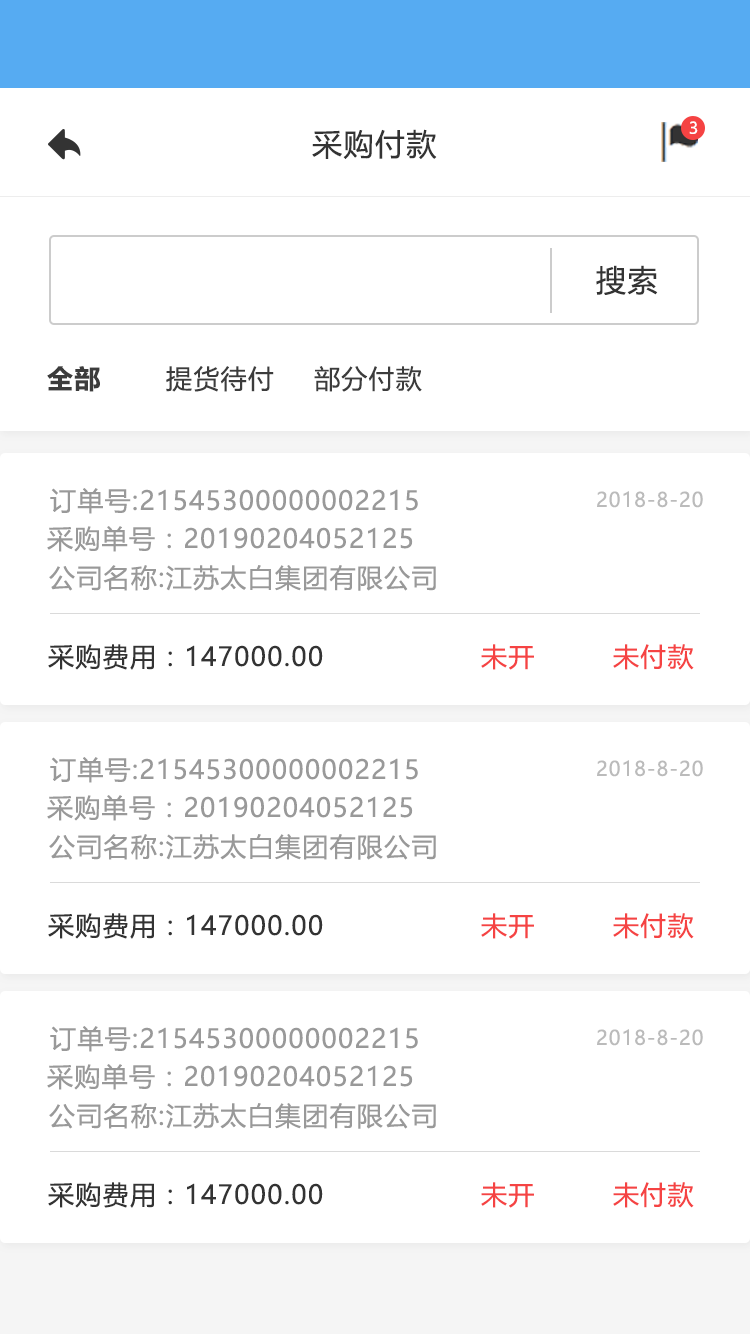
<style>
.page{position:relative;width:750px;height:1334px;background:#ffffff}
.page>*{position:absolute;margin:0}
.t1{font:16px "MicrosoftYaHeiUI";color:#ffffff}
.t2{font:30px "MicrosoftYaHeiUI";letter-spacing:0.05em;color:#333333}
.t3{font:26px "MicrosoftYaHeiUI-Bold";letter-spacing:0.05em;color:#3c3c3c}
.t4{font:26px "MicrosoftYaHeiUI";letter-spacing:0.05em;color:#3c3c3c}
.t5{font:26px "MicrosoftYaHeiUI";letter-spacing:0.05em;color:#999999}
.t6{font:20px "MicrosoftYaHeiUI";letter-spacing:0.05em;color:#bbbbbb}
.t7{font:26px "MicrosoftYaHeiUI";letter-spacing:0.05em;color:#333333}
.t8{font:26px "MicrosoftYaHeiUI";letter-spacing:0.05em;color:#f54343}
</style>
<div class="page">
<p class="t1" style="left:689px;top:121px;width:9px;height:13px">3</p>
<p class="t2" style="left:312px;top:129px;width:125px;height:30px">采购付款</p>
<p class="t2" style="left:596px;top:265px;width:62px;height:30px">搜索</p>
<p class="t3" style="left:47px;top:366px;width:53px;height:26px">全部</p>
<p class="t4" style="left:166px;top:366px;width:108px;height:26px">提货待付</p>
<p class="t4" style="left:314px;top:366px;width:108px;height:26px">部分付款</p>
<p class="t5" style="left:50px;top:488px;width:368px;height:26px">订单号:21545300000002215</p>
<p class="t6" style="left:597px;top:491px;width:106px;height:17px">2018-8-20</p>
<p class="t5" style="left:47px;top:526px;width:366px;height:26px">采购单号：20190204052125</p>
<p class="t5" style="left:49px;top:565px;width:387px;height:26px">公司名称:江苏太白集团有限公司</p>
<p class="t7" style="left:48px;top:644px;width:275px;height:26px">采购费用：147000.00</p>
<p class="t8" style="left:481px;top:644px;width:53px;height:26px">未开</p>
<p class="t8" style="left:613px;top:644px;width:81px;height:26px">未付款</p>
<p class="t5" style="left:50px;top:757px;width:368px;height:26px">订单号:21545300000002215</p>
<p class="t6" style="left:597px;top:760px;width:106px;height:17px">2018-8-20</p>
<p class="t5" style="left:47px;top:795px;width:366px;height:26px">采购单号：20190204052125</p>
<p class="t5" style="left:49px;top:834px;width:387px;height:26px">公司名称:江苏太白集团有限公司</p>
<p class="t7" style="left:48px;top:913px;width:275px;height:26px">采购费用：147000.00</p>
<p class="t8" style="left:481px;top:913px;width:53px;height:26px">未开</p>
<p class="t8" style="left:613px;top:913px;width:81px;height:26px">未付款</p>
<p class="t5" style="left:50px;top:1026px;width:368px;height:26px">订单号:21545300000002215</p>
<p class="t6" style="left:597px;top:1029px;width:106px;height:17px">2018-8-20</p>
<p class="t5" style="left:47px;top:1064px;width:366px;height:26px">采购单号：20190204052125</p>
<p class="t5" style="left:49px;top:1103px;width:387px;height:26px">公司名称:江苏太白集团有限公司</p>
<p class="t7" style="left:48px;top:1182px;width:275px;height:26px">采购费用：147000.00</p>
<p class="t8" style="left:481px;top:1182px;width:53px;height:26px">未开</p>
<p class="t8" style="left:613px;top:1182px;width:81px;height:26px">未付款</p>
</div>
